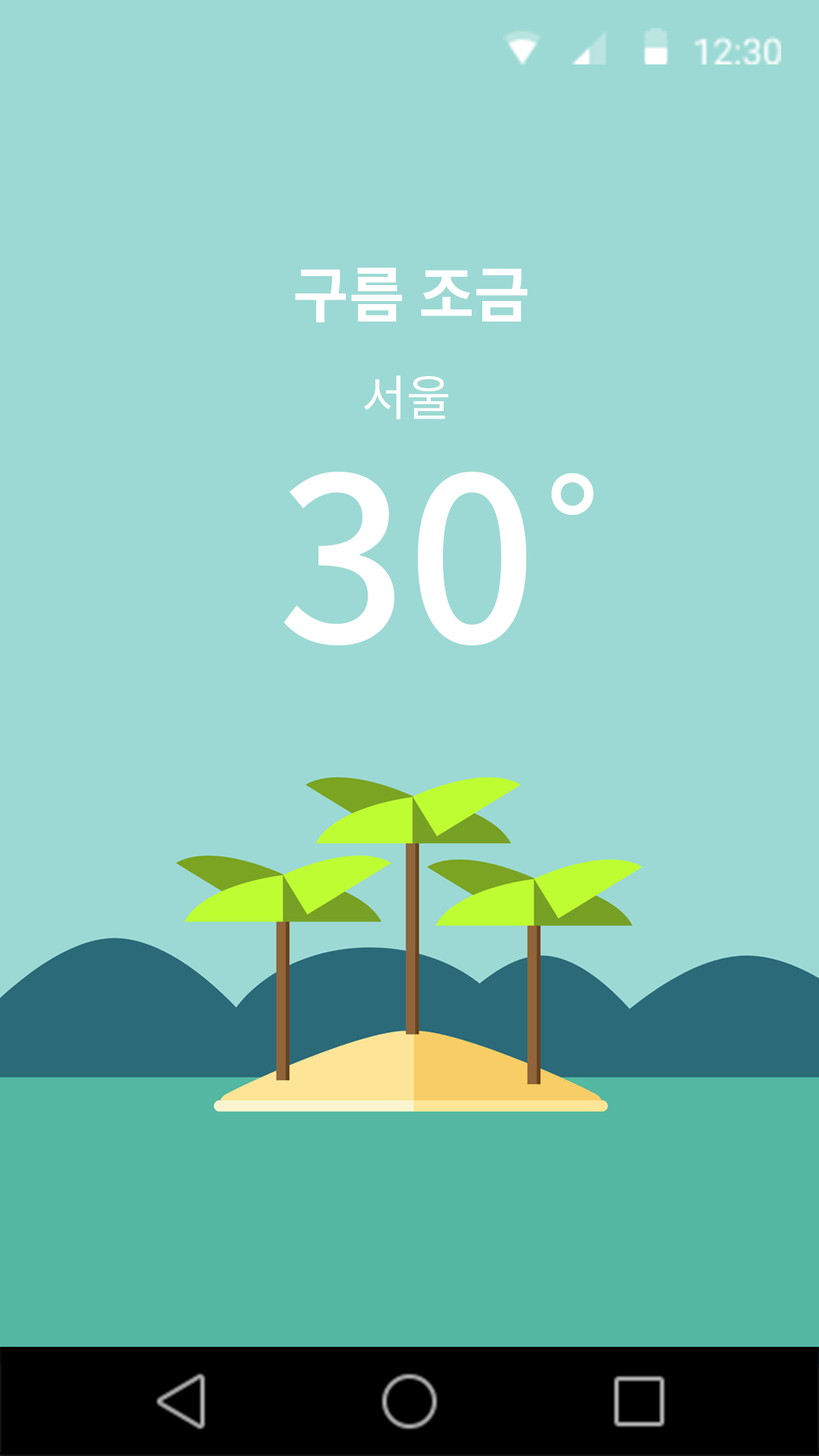
<style>
.page{position:relative;width:819px;height:1456px;background:#9cd9d4}
.page>*{position:absolute;margin:0}
.t1{font:60.7px "NotoSansCJKkr-Bold";color:#ffffff}
.t2{font:48.5px "NotoSansCJKkr-Regular";color:#ffffff}
.t3{font:227.5px "NotoSansCJKkr-Medium";color:#ffffff}
.t4{font:227.5px "Gulim";color:#ffffff}
</style>
<div class="page">
<p class="t1" style="left:295px;top:268px;width:233px;height:54px">구름 조금</p>
<p class="t2" style="left:364px;top:375px;width:84px;height:44px">서울</p>
<p class="t3" style="left:284px;top:472px;width:310px;height:174px">30<span class="t4">˚</span></p>
</div>
